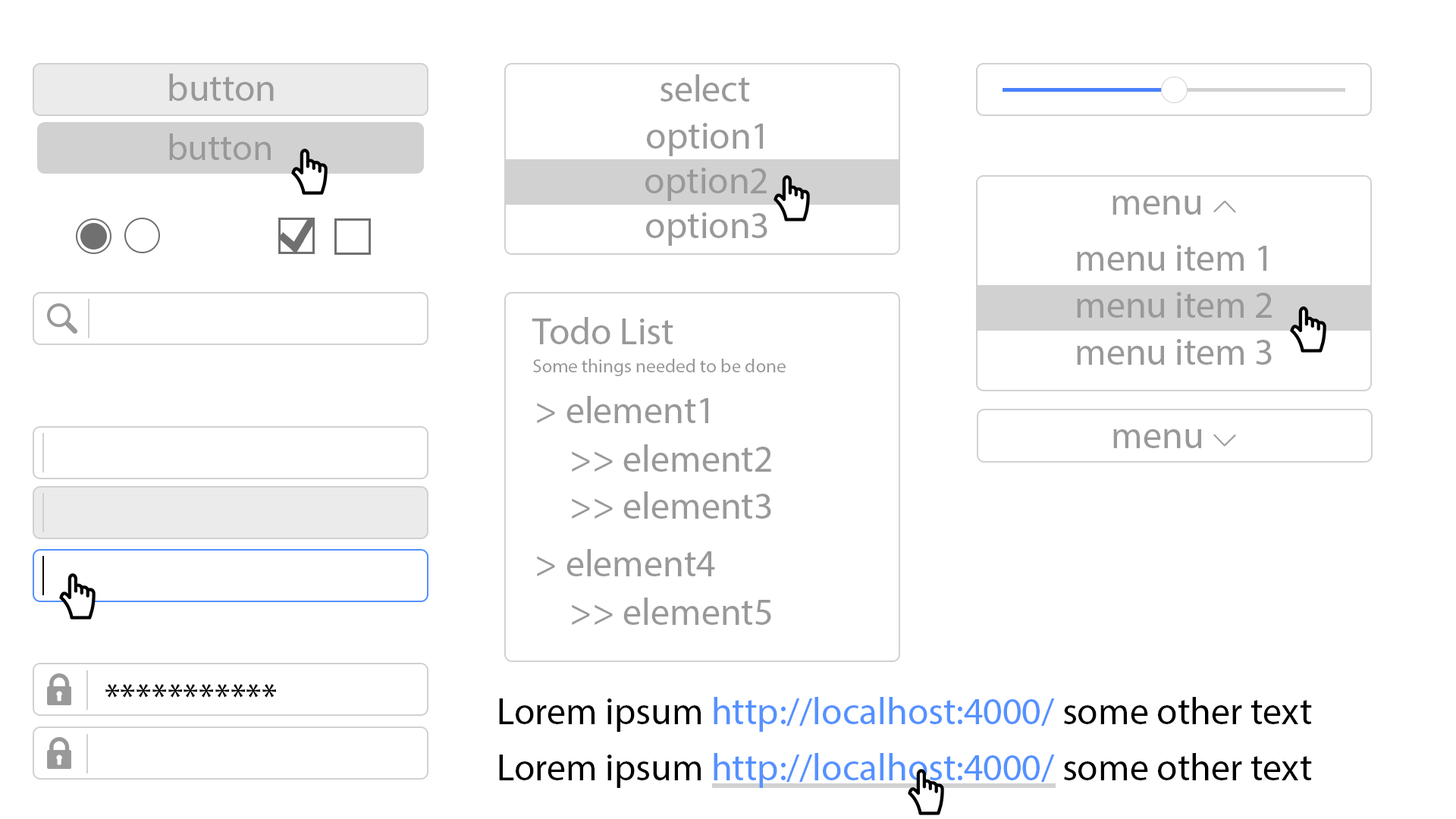
<style>
.page{position:relative;width:1456px;height:819px;background:#ffffff}
.page>*{position:absolute;margin:0}
.t1{font:37.9px "MyriadPro-Regular";color:#999999}
.t2{font:36.8px "MyriadPro-Regular";color:#999999}
.t3{font:19px "MyriadPro-Regular";color:#999999}
.t4{font:37.9px "MyriadPro-Regular";color:#000000}
.t5{font:37.9px "MyriadPro-Regular";color:#5591ff}
</style>
<div class="page">
<p class="t1" style="left:169px;top:74px;width:105px;height:27px">button</p>
<p class="t1" style="left:660px;top:74px;width:90px;height:28px">select</p>
<p class="t1" style="left:647px;top:123px;width:116px;height:33px">option1</p>
<p class="t2" style="left:169px;top:133px;width:102px;height:27px">button</p>
<p class="t1" style="left:645px;top:168px;width:122px;height:33px">option2</p>
<p class="t1" style="left:1112px;top:196px;width:89px;height:19px">menu</p>
<p class="t1" style="left:646px;top:212px;width:121px;height:34px">option3</p>
<p class="t1" style="left:1077px;top:245px;width:189px;height:26px">menu item 1</p>
<p class="t1" style="left:1077px;top:292px;width:195px;height:26px">menu item 2</p>
<p class="t1" style="left:532px;top:317px;width:141px;height:27px">Todo List</p>
<p class="t1" style="left:1077px;top:339px;width:195px;height:26px">menu item 3</p>
<p class="t3" style="left:533px;top:359px;width:253px;height:17px">Some things needed to be done</p>
<p class="t1" style="left:537px;top:396px;width:171px;height:27px">&gt; element1</p>
<p class="t1" style="left:1113px;top:429px;width:89px;height:19px">menu</p>
<p class="t1" style="left:572px;top:444px;width:199px;height:28px">&gt;&gt; element2</p>
<p class="t1" style="left:572px;top:491px;width:199px;height:28px">&gt;&gt; element3</p>
<p class="t1" style="left:537px;top:549px;width:178px;height:27px">&gt; element4</p>
<p class="t1" style="left:572px;top:598px;width:199px;height:27px">&gt;&gt; element5</p>
<p class="t4" style="left:105px;top:684px;width:171px;height:14px">***********</p>
<p class="t5" style="left:499px;top:697px;width:813px;height:35px"><span class="t4">Lorem ipsum </span>http://localhost:4000/<span class="t4"> some other text</span></p>
<p class="t5" style="left:499px;top:753px;width:813px;height:35px"><span class="t4">Lorem ipsum </span>http://localhost:4000/<span class="t4"> some other text</span></p>
</div>
